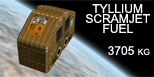
<style>
.page{position:relative;width:154px;height:77px;background:#000000}
.page>*{position:absolute;margin:0}
.t1{font:12px/10px "ArialMT";color:#fcfcfc;font-variant:small-caps}
.t2{font:12px "ArialMT";color:#fcfcfc;font-variant:small-caps}
</style>
<div class="page">
<p class="t1" style="left:85px;top:4px;width:65px;height:29px;text-align:center">TYLLIUM <br>SCRAMJET<br>FUEL</p>
<p class="t2" style="left:108px;top:46px;width:42px;height:9px">3705 kg</p>
</div>
